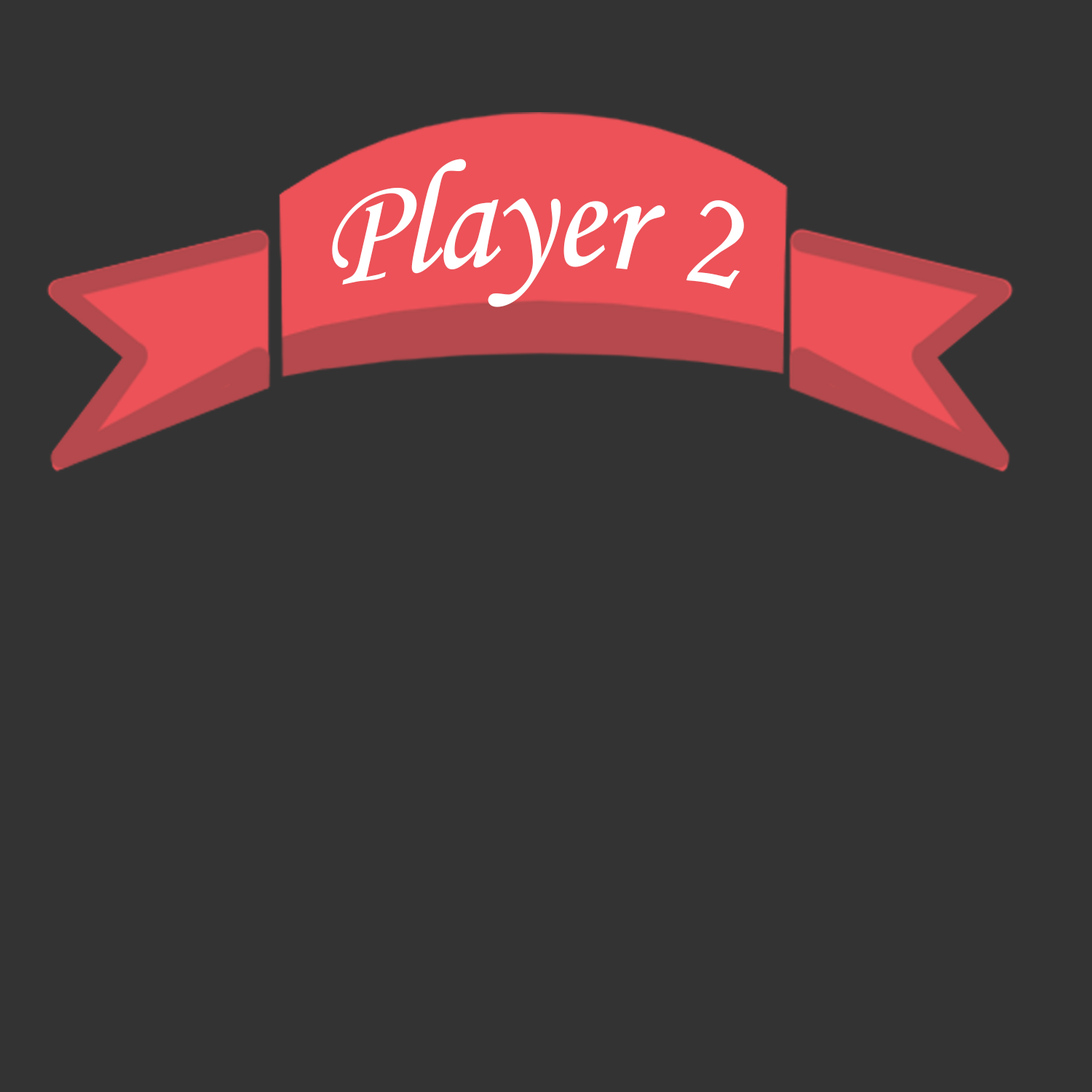
<style>
.page{position:relative;width:1092px;height:1092px;background:#333333}
.page>*{position:absolute;margin:0}
.t1{font:142.5px "MonotypeCorsiva";color:#ffffff}
</style>
<div class="page">
<p class="t1" style="left:332px;top:159px;width:412px;height:148px">Player 2</p>
</div>
